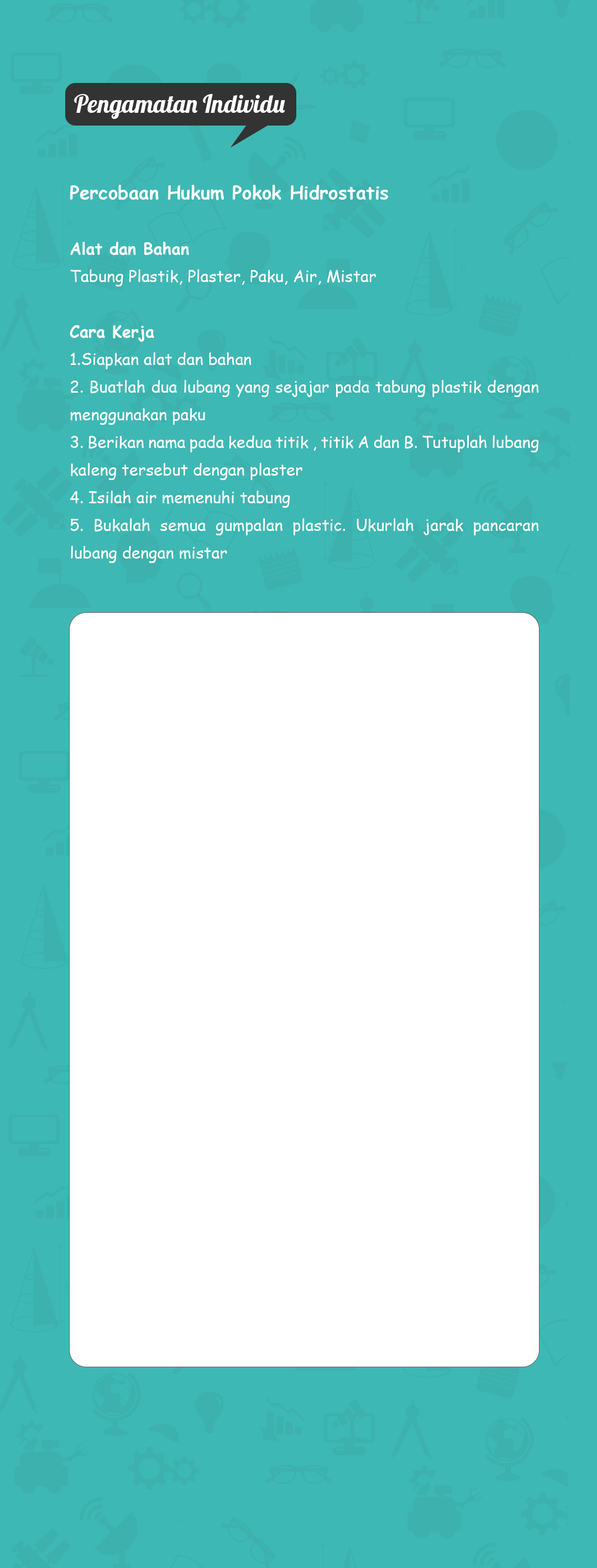
<style>
.page{position:relative;width:597px;height:1568px;background:#3eb8b4}
.page>*{position:absolute;margin:0}
.t1{font:24.6px "Lobster-Regular";color:#ffffff}
.t2{font:16.1px/27.7px "ComicSansMS";color:#ffffff}
.t3{font:18.4px/27.7px "ComicSansMS-Bold";color:#ffffff}
.t4{font:16.1px/27.7px "ComicSansMS-Bold";color:#ffffff}
</style>
<div class="page">
<p class="t1" style="left:74px;top:94px;width:211px;height:25px">Pengamatan Individu</p>
<p class="t2" style="left:70px;top:185px;width:469px;height:378px;text-align:justify"><span class="t3">Percobaan Hukum Pokok Hidrostatis<br></span><span class="t4"><br>Alat dan Bahan <br></span>Tabung Plastik, Plaster, Paku, Air, Mistar<br><br><span class="t4">Cara Kerja<br></span>1.Siapkan alat dan bahan<br>2. Buatlah dua lubang yang sejajar pada tabung plastik dengan menggunakan paku<br>3. Berikan nama pada kedua titik , titik A dan B. Tutuplah lubang kaleng tersebut dengan plaster<br>4. Isilah air memenuhi tabung<br>5. Bukalah semua gumpalan plastic. Ukurlah jarak pancaran lubang dengan mistar</p>
</div>
